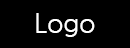
<style>
.page{position:relative;width:130px;height:48px;background:#000000}
.page>*{position:absolute;margin:0}
.t1{font:26.6px "NanumGothic";color:#ffffff}
</style>
<div class="page">
<p class="t1" style="left:36px;top:13px;width:59px;height:24px">Logo</p>
</div>
